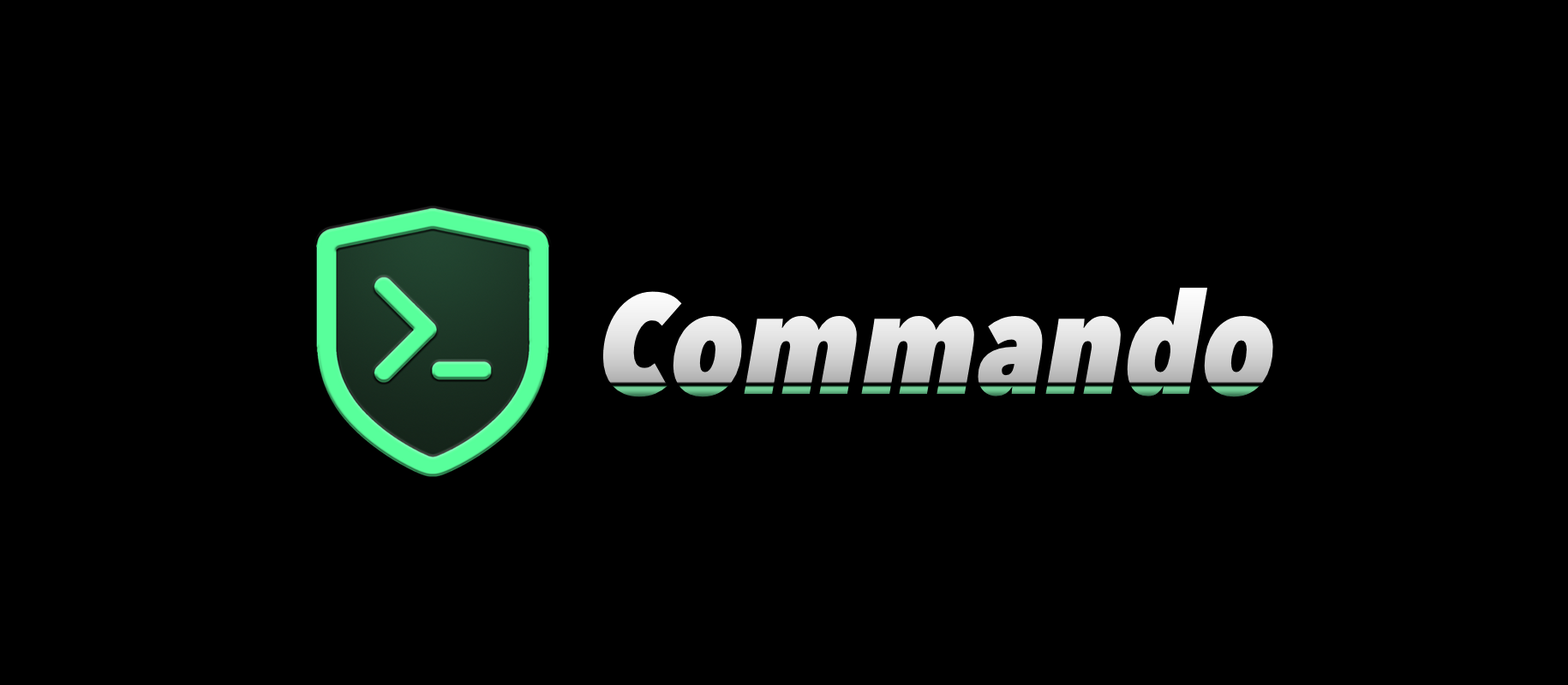
<style>
.page{position:relative;width:1568px;height:685px;background:#000000}
.page>*{position:absolute;margin:0}
.t1{font:140.5px "AvenirNextCondensed-HeavyItalic";color:#dedddd}
</style>
<div class="page">
<p class="t1" style="left:602px;top:288px;width:671px;height:110px">Commando</p>
</div>
